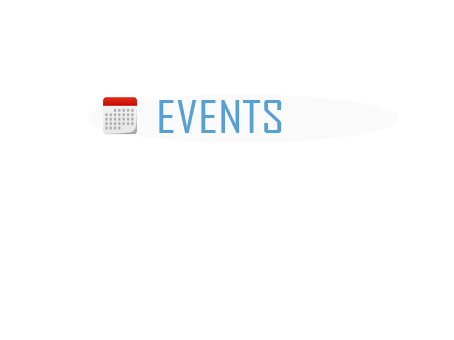
<style>
.page{position:relative;width:454px;height:340px;background:#ffffff}
.page>*{position:absolute;margin:0}
.t1{font:43.4px "AgencyFB-Reg";color:#56a0d3;scale:1.29 1}
</style>
<div class="page">
<p class="t1" style="left:159px;top:100px;width:123px;height:33px">EVENTS</p>
</div>
